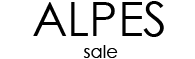
<style>
.page{position:relative;width:195px;height:59px;background:#ffffff}
.page>*{position:absolute;margin:0}
.t1{font:48px "CenturyGothic";color:#000000}
.t2{font:18px "CenturyGothic";color:#000000}
</style>
<div class="page">
<p class="t1" style="left:33px;top:1px;width:131px;height:36px">ALPES</p>
<p class="t2" style="left:83px;top:45px;width:35px;height:13px">sale</p>
</div>
